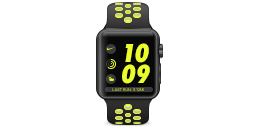
<style>
.page{position:relative;width:256px;height:128px;background:#ffffff}
.page>*{position:absolute;margin:0}
.t1{font:24px "FuturaLT-CondExtraBoldObl";color:#ebfd2d}
.t2{font:4px "SFUIDisplay-Regular"}
</style>
<div class="page">
<p class="t1" style="left:125px;top:43px;width:24px;height:20px">10</p>
<p class="t1" style="left:122px;top:64px;width:28px;height:20px">09</p>
<p class="t2" style="left:112px;top:88px;width:32px;height:3px">LAST RUN: 3.12MI</p>
</div>
